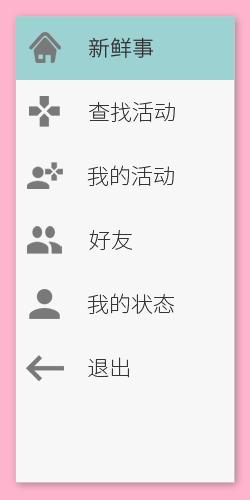
<style>
.page{position:relative;width:250px;height:500px;background:#f7f7f7}
.page>*{position:absolute;margin:0}
.t1{font:21.6px "NotoSansCJKsc-Light";color:#353535}
.t2{font:21.6px "NotoSansCJKsc-Thin";color:#353535}
</style>
<div class="page">
<p class="t1" style="left:89px;top:37px;width:65px;height:21px">新鲜事</p>
<p class="t2" style="left:89px;top:101px;width:86px;height:21px">查找活动</p>
<p class="t2" style="left:87px;top:165px;width:87px;height:21px">我的活动</p>
<p class="t2" style="left:89px;top:230px;width:43px;height:20px">好友</p>
<p class="t2" style="left:87px;top:293px;width:87px;height:21px">我的状态</p>
<p class="t2" style="left:88px;top:357px;width:41px;height:21px">退出</p>
</div>
